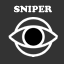
<style>
.page{position:relative;width:64px;height:64px;background:#333333}
.page>*{position:absolute;margin:0}
.t1{font:9px "CooperBlackStd";color:#ffffff}
</style>
<div class="page">
<p class="t1" style="left:13px;top:5px;width:39px;height:8px">SNIPER</p>
</div>
